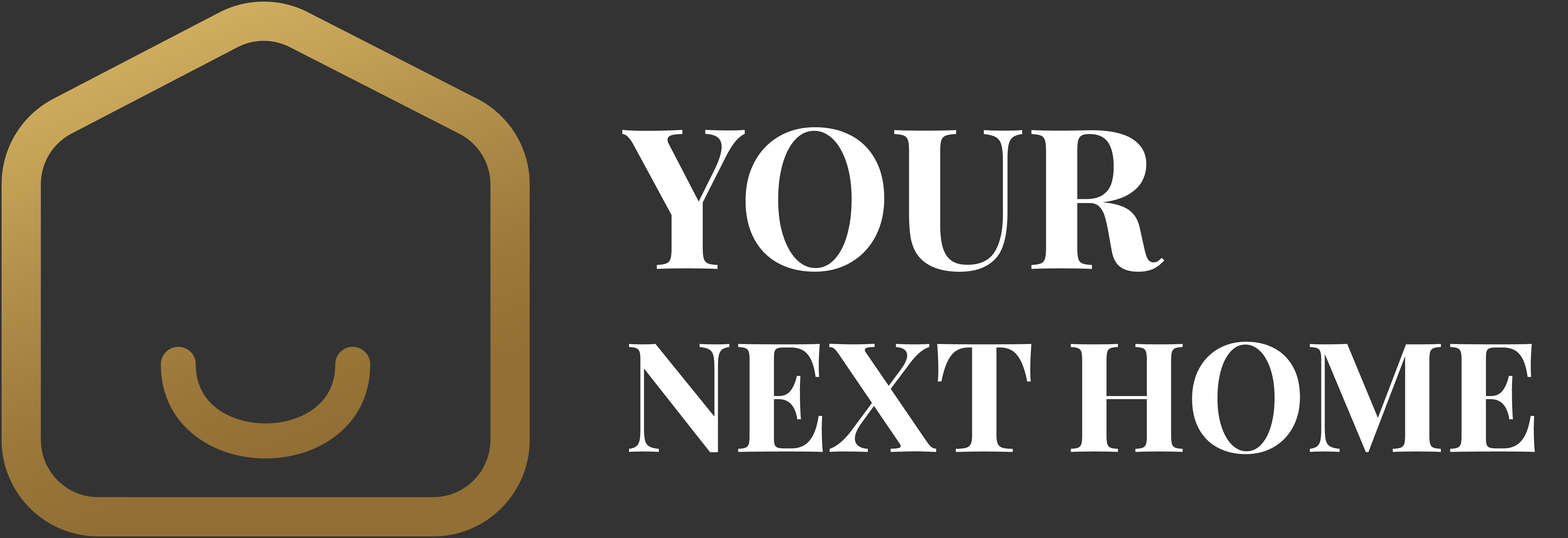
<style>
.page{position:relative;width:1568px;height:538px;background:#333333}
.page>*{position:absolute;margin:0}
.t1{font:152.4px "PlayfairDisplay-Bold";letter-spacing:-0.005em;color:#ffffff;text-transform:uppercase}
.t2{font:196px "PlayfairDisplay-Bold";letter-spacing:-0.005em;color:#ffffff;text-transform:uppercase}
</style>
<div class="page">
<p class="t1" style="left:622px;top:127px;width:913px;height:327px"><span class="t2">YOUR<br></span>NEXT HOME</p>
</div>
